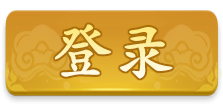
<style>
.page{position:relative;width:223px;height:104px}
.page>*{position:absolute;margin:0}
.t1{font:60px "AaBoruokaishuBldjf";letter-spacing:0.02em}
</style>
<div class="page">
<p class="t1" style="left:54px;top:24px;width:119px;height:55px">登录</p>
</div>
